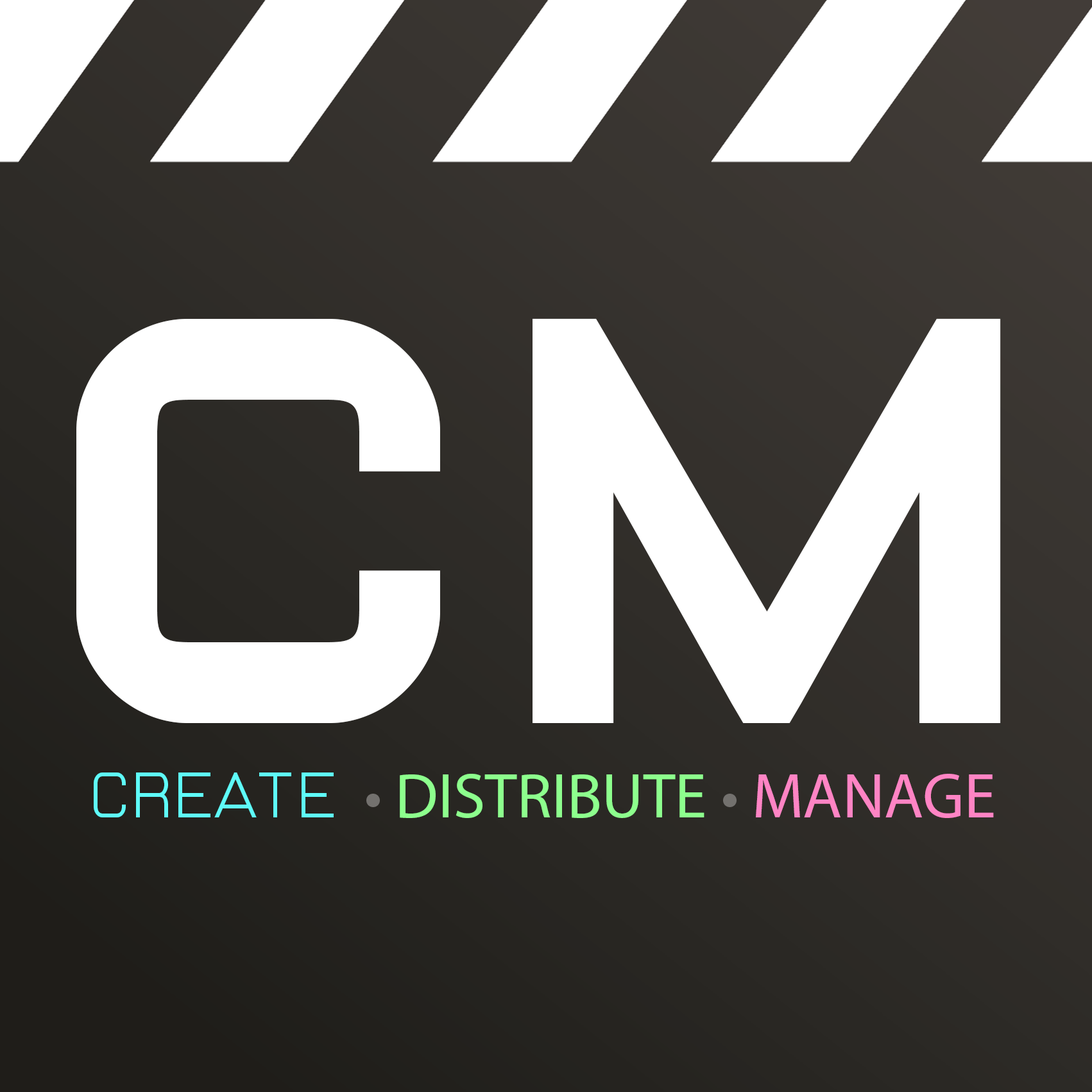
<style>
.page{position:relative;width:1092px;height:1092px;background:#ffffff}
.page>*{position:absolute;margin:0}
.t1{font:577.4px "RODUSsquare700";color:#ffffff}
.t2{font:64.2px "MyriadPro-Regular";color:#8dff8d}
.t3{font:64.2px "RODUSreg300";color:#5efbf9}
.t4{font:64.2px "MyriadPro-Regular";color:#73716e}
.t5{font:64.2px "MyriadPro-Regular";color:#ff84c4}
</style>
<div class="page">
<p class="t1" style="left:76px;top:318px;width:925px;height:405px">CM</p>
<p class="t2" style="left:94px;top:772px;width:900px;height:46px"><span class="t3">CREATE </span><span class="t4">• </span>DISTRIBUTE<span class="t4"> • </span><span class="t5">MANAGE</span></p>
</div>
